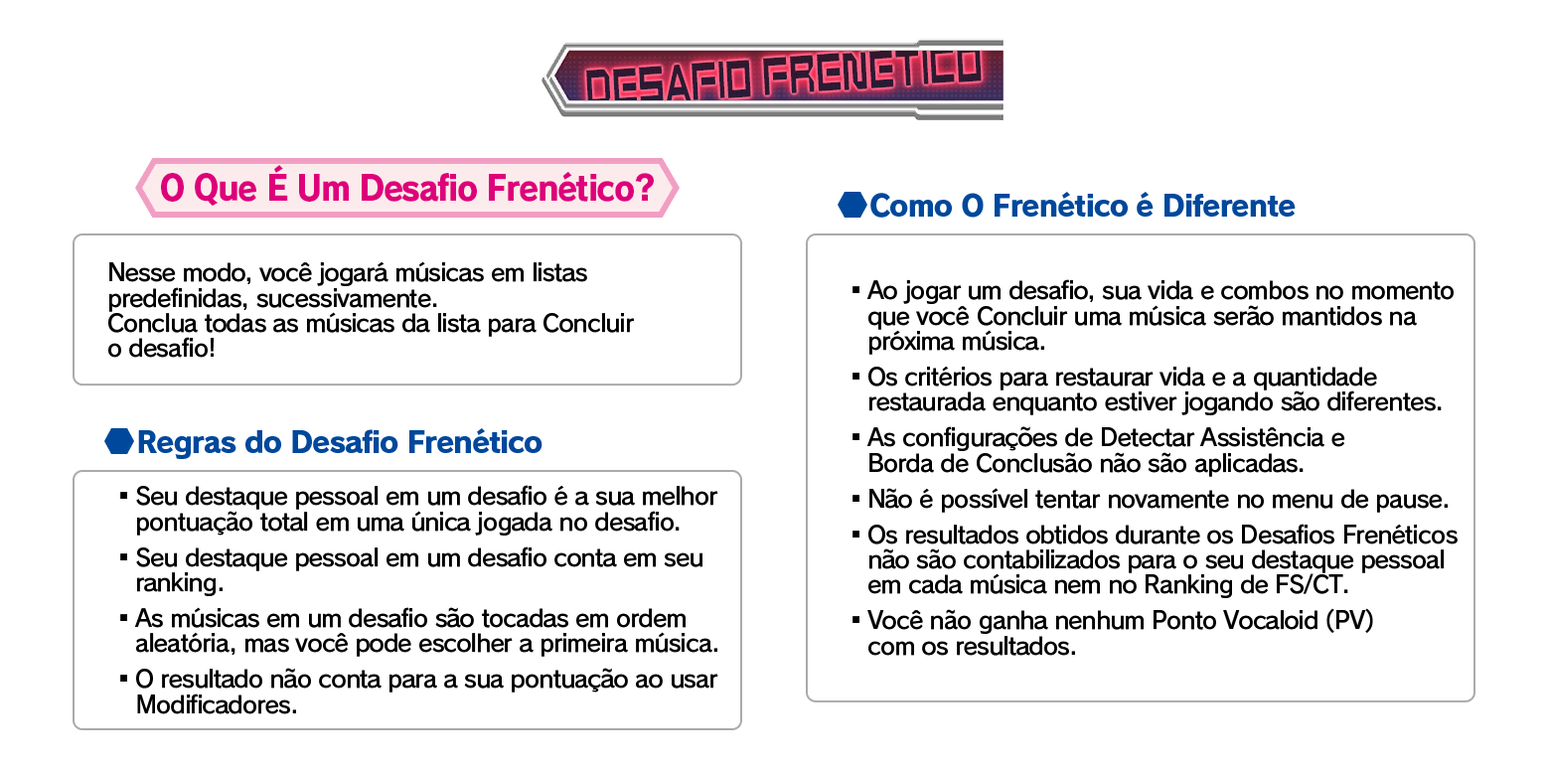
<style>
.page{position:relative;width:1546px;height:771px;background:#ffffff}
.page>*{position:absolute;margin:0}
.t1{font:34.5px "RodinPro-EB";letter-spacing:-0.048em;color:#de007b;scale:0.94 1}
.t2{font:29.2px "RodinPro-EB";letter-spacing:-0.04em;color:#00489c}
.t3{font:23.9px/25.2px "RodinPro-DB";letter-spacing:-0.04em;color:#000000}
</style>
<div class="page">
<p class="t1" style="left:161px;top:165px;width:493px;height:42px">O Que É Um Desafio Frenético?</p>
<p class="t2" style="left:871px;top:192px;width:425px;height:26px">Como O Frenético é Diferente</p>
<p class="t3" style="left:108px;top:261px;width:526px;height:97px">Nesse modo, você jogará músicas em listas<br>predefinidas, sucessivamente.<br>Conclua todas as músicas da lista para Concluir<br>o desafio!</p>
<p class="t3" style="left:853px;top:279px;width:605px;height:377px">▪Ao jogar um desafio, sua vida e combos no momento<br>que você Concluir uma música serão mantidos na<br>próxima música.<br>▪Os critérios para restaurar vida e a quantidade<br>restaurada enquanto estiver jogando são diferentes.<br>▪As configurações de Detectar Assistência e<br>Borda de Conclusão não são aplicadas.<br>▪Não é possível tentar novamente no menu de pause.<br>▪Os resultados obtidos durante os Desafios Frenéticos<br>não são contabilizados para o seu destaque pessoal<br>em cada música nem no Ranking de FS/CT.<br>▪Você não ganha nenhum Ponto Vocaloid (PV)<br>com os resultados.</p>
<p class="t2" style="left:138px;top:428px;width:405px;height:31px">Regras do Desafio Frenético</p>
<p class="t3" style="left:120px;top:485px;width:598px;height:230px">▪Seu destaque pessoal em um desafio é a sua melhor<br>pontuação total em uma única jogada no desafio.<br>▪Seu destaque pessoal em um desafio conta em seu<br>ranking.<br>▪As músicas em um desafio são tocadas em ordem<br>aleatória, mas você pode escolher a primeira música.<br>▪O resultado não conta para a sua pontuação ao usar<br>Modificadores.</p>
</div>
